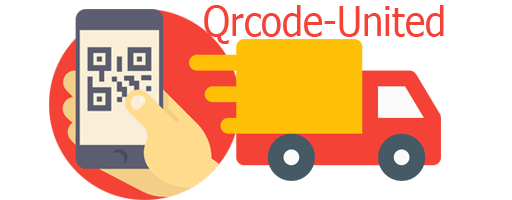
<style>
.page{position:relative;width:512px;height:200px;background:#ffffff}
.page>*{position:absolute;margin:0}
.t1{font:40.5px "Tahoma";color:#f44336;scale:0.94 1}
</style>
<div class="page">
<p class="t1" style="left:204px;top:5px;width:240px;height:39px">Qrcode-United</p>
</div>
